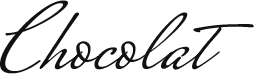
<style>
.page{position:relative;width:254px;height:74px;background:#ffffff}
.page>*{position:absolute;margin:0}
.t1{font:96px "MrsSaintDelafield-Regular";color:#111111}
</style>
<div class="page">
<p class="t1" style="left:0px;top:0px;width:254px;height:74px">Chocolat</p>
</div>
